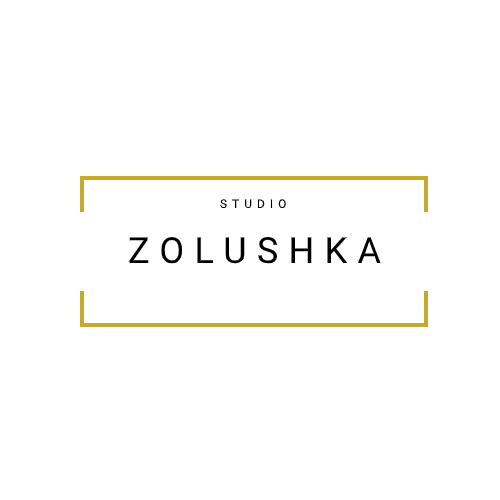
<style>
.page{position:relative;width:500px;height:500px;background:#ffffff}
.page>*{position:absolute;margin:0}
.t1{font:12px "Roboto-Regular";letter-spacing:0.415em;color:#000000}
.t2{font:36px "Roboto-Regular";letter-spacing:0.287em;color:#000000}
</style>
<div class="page">
<p class="t1" style="left:220px;top:199px;width:66px;height:10px">STUDIO</p>
<p class="t2" style="left:129px;top:237px;width:252px;height:27px">ZOLUSHKA</p>
</div>
